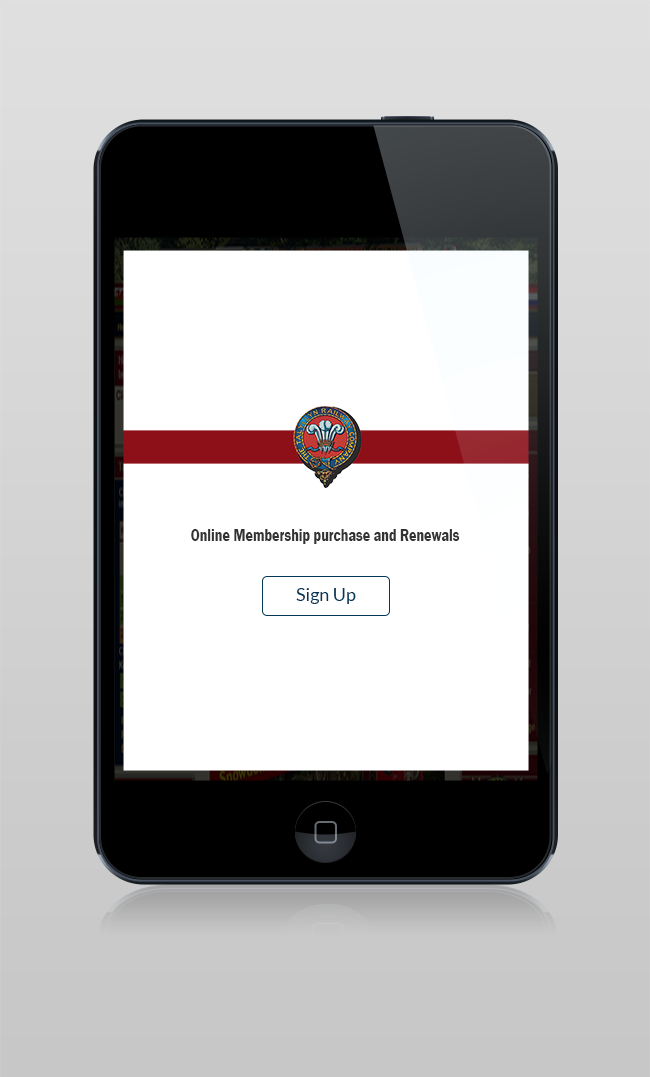
<style>
.page{position:relative;width:650px;height:1077px;background:#ffffff}
.page>*{position:absolute;margin:0}
.t1{font:18.2px "FranklinGothic-Demi";color:#333333;scale:0.77 1}
.t2{font:18px "Lato-Regular";color:#023759}
</style>
<div class="page">
<p class="t1" style="left:191px;top:529px;width:269px;height:15px">Online Membership purchase and Renewals</p>
<p class="t2" style="left:296px;top:588px;width:60px;height:16px">Sign Up</p>
</div>
